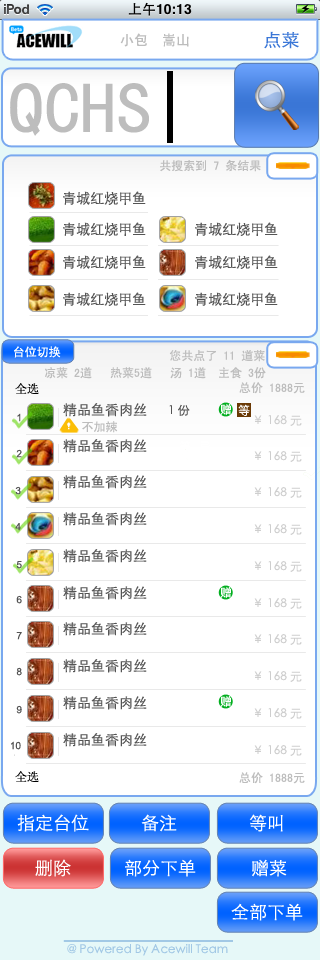
<style>
.page{position:relative;width:320px;height:960px;background:#ffffff}
.page>*{position:absolute;margin:0}
.t1{font:14px "SimHei";color:#bdbdbd}
.t2{font:18px "STXihei";color:#3b77d7}
.t3{font:72px "SimHei";color:#bdbdbd}
.t4{font:72px "SimHei";color:#000000}
.t5{font:12px "SimHei";color:#bdbdbd}
.t6{font:14px "STXihei";color:#545454}
.t7{font:12px "SimHei";color:#ffffff}
.t8{font:12px "SimHei";color:#bebebe}
.t9{font:12px "SimSun";color:#000000}
.t10{font:12px "STXihei";color:#545454}
.t11{font:12px "STXihei";color:#ffffff}
.t12{font:12px "Fixedsys";color:#ffffff}
.t13{font:12px "STXihei";color:#cecece}
.t14{font:18px "STXihei";color:#ffffff}
.t15{font:12px "STXihei";color:#a2c8e5}
</style>
<div class="page">
<p class="t1" style="left:120px;top:33px;width:69px;height:14px">小包  嵩山</p>
<p class="t2" style="left:264px;top:31px;width:35px;height:18px">点菜</p>
<p class="t3" style="left:10px;top:71px;width:163px;height:72px">QCHS<span class="t4">|</span></p>
<p class="t5" style="left:160px;top:159px;width:101px;height:13px">共搜索到 7 条结果</p>
<p class="t6" style="left:63px;top:191px;width:83px;height:14px">青城红烧甲鱼</p>
<p class="t6" style="left:63px;top:222px;width:83px;height:14px">青城红烧甲鱼</p>
<p class="t6" style="left:195px;top:222px;width:83px;height:14px">青城红烧甲鱼</p>
<p class="t6" style="left:63px;top:255px;width:83px;height:14px">青城红烧甲鱼</p>
<p class="t6" style="left:195px;top:255px;width:83px;height:14px">青城红烧甲鱼</p>
<p class="t6" style="left:63px;top:292px;width:83px;height:14px">青城红烧甲鱼</p>
<p class="t6" style="left:195px;top:292px;width:83px;height:14px">青城红烧甲鱼</p>
<p class="t7" style="left:14px;top:346px;width:47px;height:12px">台位切换</p>
<p class="t8" style="left:169px;top:350px;width:96px;height:12px">您共点了 11 道菜</p>
<p class="t5" style="left:45px;top:367px;width:221px;height:12px">凉菜 2道   热菜5道   汤 1道  主食 3份</p>
<p class="t9" style="left:15px;top:383px;width:24px;height:11px">全选</p>
<p class="t5" style="left:239px;top:382px;width:66px;height:12px">总价 1888元</p>
<p class="t6" style="left:63px;top:403px;width:84px;height:14px">精品鱼香肉丝</p>
<p class="t10" style="left:169px;top:404px;width:21px;height:12px">1 份</p>
<p class="t7" style="left:220px;top:404px;width:11px;height:11px">赠</p>
<p class="t11" style="left:238px;top:404px;width:12px;height:12px">等</p>
<p class="t12" style="left:67px;top:422px;width:4px;height:8px">!</p>
<p class="t5" style="left:82px;top:421px;width:36px;height:12px">不加辣</p>
<p class="t13" style="left:254px;top:415px;width:48px;height:11px">￥ 168 元</p>
<p class="t6" style="left:63px;top:439px;width:84px;height:14px">精品鱼香肉丝</p>
<p class="t13" style="left:254px;top:451px;width:48px;height:11px">￥ 168 元</p>
<p class="t6" style="left:63px;top:475px;width:84px;height:14px">精品鱼香肉丝</p>
<p class="t13" style="left:254px;top:487px;width:48px;height:11px">￥ 168 元</p>
<p class="t6" style="left:63px;top:512px;width:84px;height:14px">精品鱼香肉丝</p>
<p class="t13" style="left:254px;top:524px;width:48px;height:11px">￥ 168 元</p>
<p class="t6" style="left:63px;top:549px;width:84px;height:14px">精品鱼香肉丝</p>
<p class="t13" style="left:254px;top:561px;width:48px;height:11px">￥ 168 元</p>
<p class="t6" style="left:63px;top:586px;width:84px;height:14px">精品鱼香肉丝</p>
<p class="t7" style="left:220px;top:587px;width:11px;height:11px">赠</p>
<p class="t13" style="left:254px;top:598px;width:48px;height:11px">￥ 168 元</p>
<p class="t6" style="left:63px;top:622px;width:84px;height:14px">精品鱼香肉丝</p>
<p class="t13" style="left:254px;top:634px;width:48px;height:11px">￥ 168 元</p>
<p class="t6" style="left:63px;top:659px;width:84px;height:14px">精品鱼香肉丝</p>
<p class="t13" style="left:254px;top:671px;width:48px;height:11px">￥ 168 元</p>
<p class="t6" style="left:63px;top:696px;width:84px;height:14px">精品鱼香肉丝</p>
<p class="t7" style="left:220px;top:696px;width:11px;height:11px">赠</p>
<p class="t13" style="left:254px;top:708px;width:48px;height:11px">￥ 168 元</p>
<p class="t6" style="left:63px;top:733px;width:84px;height:14px">精品鱼香肉丝</p>
<p class="t13" style="left:254px;top:745px;width:48px;height:11px">￥ 168 元</p>
<p class="t9" style="left:15px;top:771px;width:24px;height:11px">全选</p>
<p class="t5" style="left:239px;top:772px;width:66px;height:12px">总价 1888元</p>
<p class="t14" style="left:17px;top:814px;width:72px;height:18px">指定台位</p>
<p class="t14" style="left:141px;top:814px;width:36px;height:18px">备注</p>
<p class="t14" style="left:249px;top:814px;width:34px;height:18px">等叫</p>
<p class="t14" style="left:35px;top:859px;width:36px;height:18px">删除</p>
<p class="t14" style="left:125px;top:859px;width:71px;height:18px">部分下单</p>
<p class="t14" style="left:252px;top:859px;width:35px;height:18px">赠菜</p>
<p class="t14" style="left:231px;top:903px;width:72px;height:18px">全部下单</p>
<p class="t15" style="left:67px;top:944px;width:161px;height:12px">@ Powered By Acewill Team</p>
</div>
